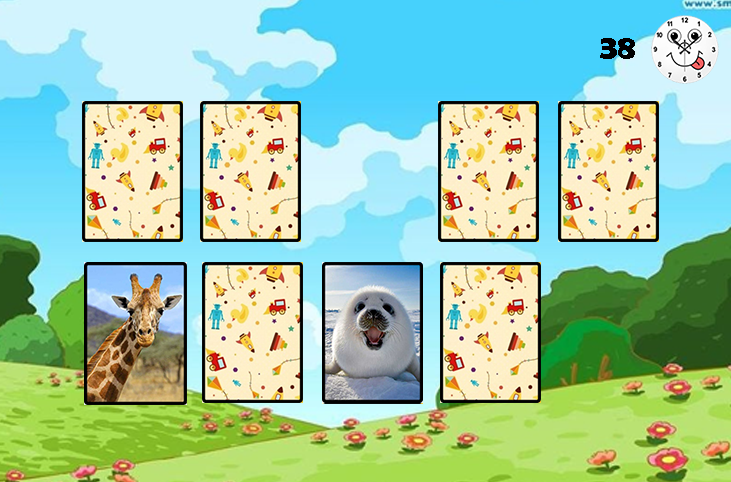
<style>
.page{position:relative;width:731px;height:482px}
.page>*{position:absolute;margin:0}
.t1{font:36px "BerlinSansFBDemi-Bold";color:#000000}
</style>
<div class="page">
<p class="t1" style="left:600px;top:38px;width:35px;height:21px">38</p>
</div>
